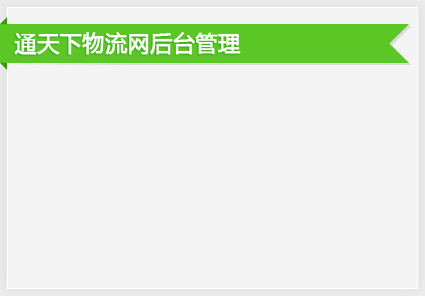
<style>
.page{position:relative;width:425px;height:296px;background:#f4f4f4}
.page>*{position:absolute;margin:0}
.t1{font:22px "MicrosoftYaHei";color:#ffffff;font-weight:bold}
</style>
<div class="page">
<p class="t1" style="left:14px;top:32px;width:227px;height:23px">通天下物流网后台管理</p>
</div>
